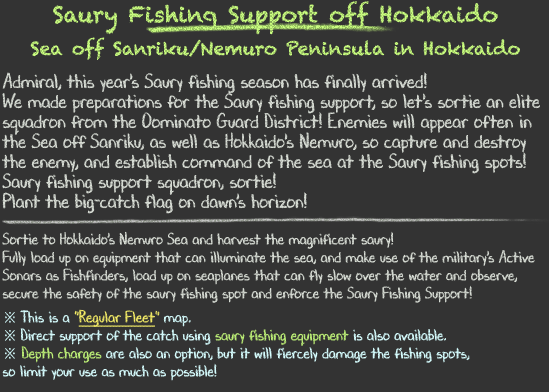
<style>
.page{position:relative;width:549px;height:392px;background:#333333}
.page>*{position:absolute;margin:0}
.t1{font:18px/36px "Chalkduster"}
.t2{font:22px/36px "Chalkduster"}
.t3{font:20px/20px "DJBChalkItUp";color:#d9ded6;scale:0.9 1}
.t4{font:16px/18px "DJBChalkItUp";color:#d9ded6;scale:0.9 1}
.t5{font:16px/24px "DJBChalkItUp";color:#d9ded6;scale:0.9 1}
.t6{font:16px/18px "TimesNewRomanPSMT";color:#d7feff;scale:0.9 1}
.t7{font:16px/18px "DJBChalkItUp";color:#d7feff;scale:0.9 1}
.t8{font:16px/18px "DJBChalkItUp";color:#f5ed68;scale:0.9 1}
.t9{font:16px/18px "DJBChalkItUp";color:#f5ed68;text-decoration:underline;scale:0.9 1}
.t10{font:16px/18px "DJBChalkItUp";color:#bdef78;scale:0.9 1}
</style>
<div class="page">
<p class="t1" style="left:30px;top:1px;width:490px;height:59px;text-align:center"><span class="t2">Saury Fishing Support off Hokkaido<br></span>Sea off Sanriku/Nemuro Peninsula in Hokkaido</p>
<p class="t3" style="left:2px;top:72px;width:538px;height:309px">Admiral, this year's Saury fishing season has finally arrived!<br>We made preparations for the Saury fishing support, so let's sortie an elite<br>squadron from the Oominato Guard District! Enemies will appear often in<br>the Sea off Sanriku, as well as Hokkaido's Nemuro, so capture and destroy<br>the enemy, and establish command of the sea at the Saury fishing spots!<br>Saury fishing support squadron, sortie!<br>Plant the big-catch flag on dawn’s horizon!<br><br><span class="t4">Sortie to Hokkaido’s Nemuro Sea and harvest the magnificent saury!<br>Fully load up on equipment that can illuminate the sea, and make use of the military’s Active<br>Sonars as Fishfinders, load up on seaplanes that can fly slow over the water and observe,<br></span><span class="t5">secure the safety of the saury fishing spot and enforce the Saury Fishing Support!<br></span><span class="t6">※ </span><span class="t7">This is a </span><span class="t8">"</span><span class="t9">Regular Fleet</span><span class="t8">"</span><span class="t7"> map.<br></span><span class="t6">※ </span><span class="t7">Direct support of the catch using</span><span class="t10"> saury fishing equipment</span><span class="t7"> is also available.<br></span><span class="t6">※ </span><span class="t10">Depth charges</span><span class="t7"> are also an option, but it will fiercely damage the fishing spots,<br>so limit your use as much as possible!</span></p>
</div>
